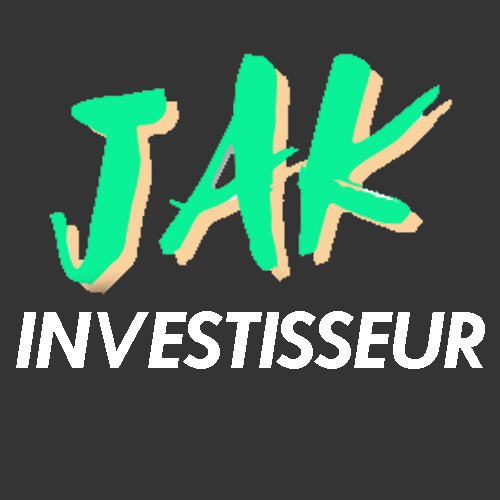
<style>
.page{position:relative;width:500px;height:500px;background:#343434}
.page>*{position:absolute;margin:0}
.t1{font:88px "TwCenMT-BoldItalic";color:#ffffff}
</style>
<div class="page">
<p class="t1" style="left:16px;top:311px;width:469px;height:58px">INVESTISSEUR</p>
</div>
